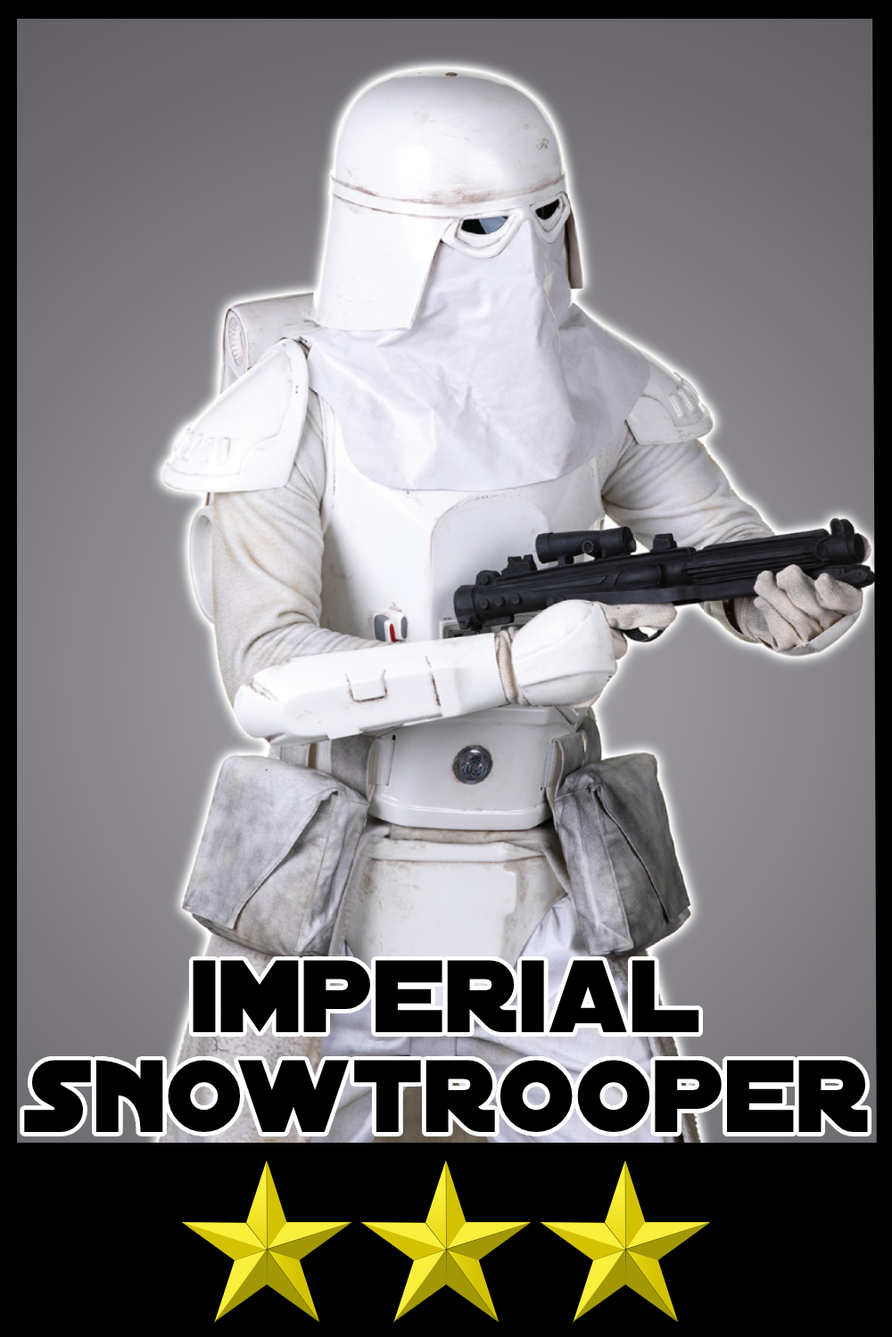
<style>
.page{position:relative;width:892px;height:1337px;background:#000000}
.page>*{position:absolute;margin:0}
.t1{font:110.6px/99.5px "DistantGalaxy";color:#000000}
</style>
<div class="page">
<p class="t1" style="left:24px;top:960px;width:844px;height:172px;text-align:center">imperial<br>snowtrooper</p>
</div>
